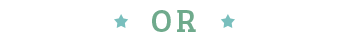
<style>
.page{position:relative;width:344px;height:41px;background:#ffffff}
.page>*{position:absolute;margin:0}
.t1{font:31.9px "BreeSerif-Regular";letter-spacing:0.12em;color:#6faa8c;text-transform:uppercase}
</style>
<div class="page">
<p class="t1" style="left:152px;top:10px;width:44px;height:22px">or</p>
</div>
